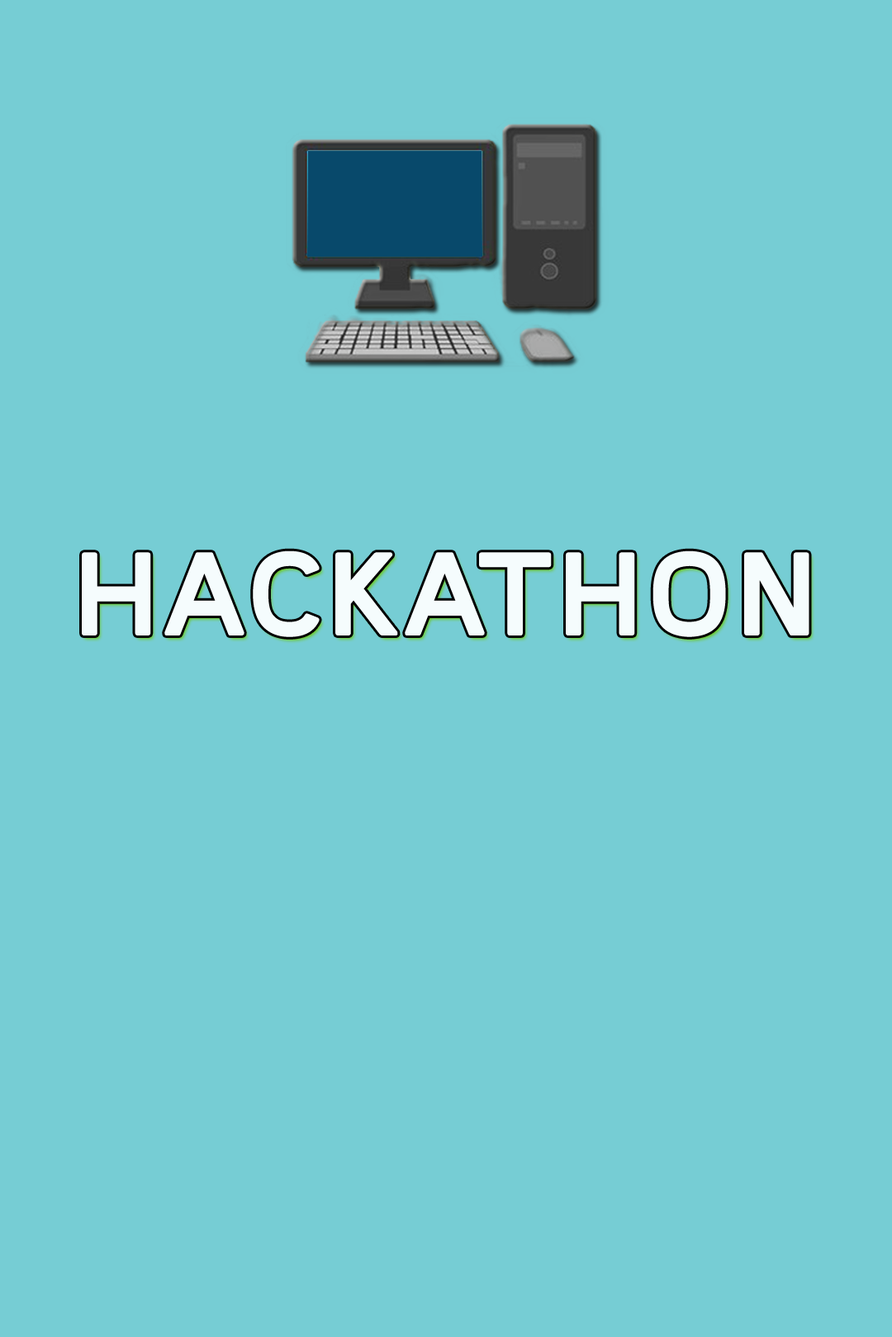
<style>
.page{position:relative;width:892px;height:1337px;background:#76cdd4}
.page>*{position:absolute;margin:0}
.t1{font:133.6px "SimvoniBold";color:#ecf1f4;scale:1.03 1}
</style>
<div class="page">
<p class="t1" style="left:82px;top:551px;width:727px;height:86px">HACKATHON</p>
</div>
